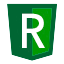
<style>
.page{position:relative;width:64px;height:64px;background:#ffffff}
.page>*{position:absolute;margin:0}
.t1{font:48px "AvenirNext-Medium";letter-spacing:-0.025em;color:#ffffff;scale:0.93 1}
</style>
<div class="page">
<p class="t1" style="left:22px;top:13px;width:23px;height:35px">R</p>
</div>
